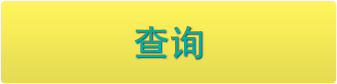
<style>
.page{position:relative;width:337px;height:84px}
.page>*{position:absolute;margin:0}
.t1{font:36px "AdobeHeitiStd-Regular";color:#00ada7}
</style>
<div class="page">
<p class="t1" style="left:134px;top:25px;width:68px;height:34px">查询</p>
</div>
